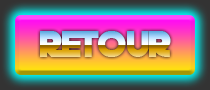
<style>
.page{position:relative;width:210px;height:90px}
.page>*{position:absolute;margin:0}
.t1{font:36px "DeathStar"}
</style>
<div class="page">
<p class="t1" style="left:40px;top:31px;width:131px;height:26px">Retour</p>
</div>
